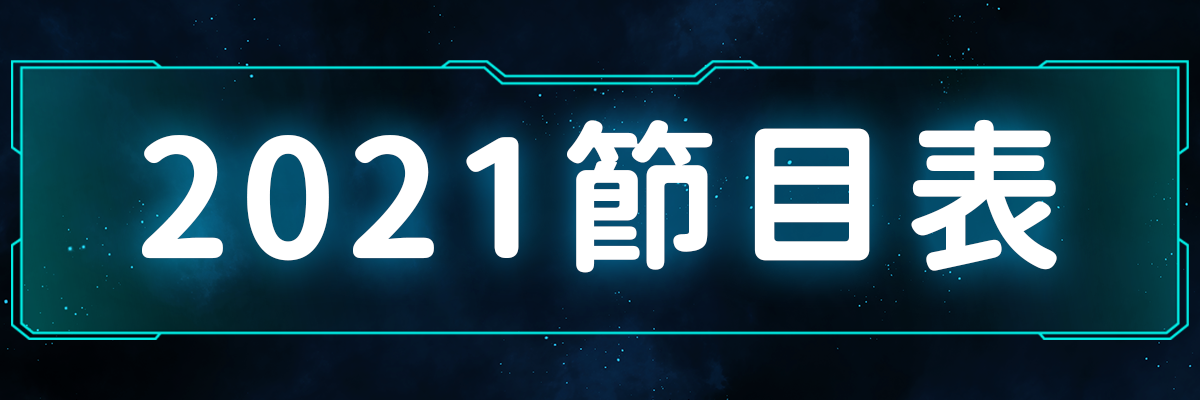
<style>
.page{position:relative;width:1200px;height:400px}
.page>*{position:absolute;margin:0}
.t1{font:163px "GenSenRoundedTW-B";letter-spacing:0.06em;color:#ffffff}
</style>
<div class="page">
<p class="t1" style="left:142px;top:119px;width:915px;height:154px">2021節目表</p>
</div>
